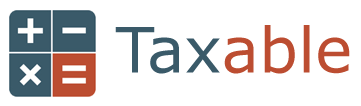
<style>
.page{position:relative;width:361px;height:106px;background:#ffffff}
.page>*{position:absolute;margin:0}
.t1{font:62.5px "Verdana";color:#bc4d31}
.t2{font:62.5px "Verdana";color:#3a5a69}
</style>
<div class="page">
<p class="t1" style="left:115px;top:25px;width:235px;height:49px"><span class="t2">Tax</span>able</p>
</div>
